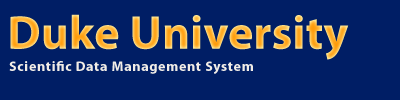
<style>
.page{position:relative;width:400px;height:100px;background:#001e65}
.page>*{position:absolute;margin:0}
.t1{font:48px "MyriadPro-Bold";color:#ff9905}
.t2{font:14px "MyriadPro-Bold";letter-spacing:0.05em;color:#f1ede7}
</style>
<div class="page">
<p class="t1" style="left:10px;top:14px;width:339px;height:46px">Duke University</p>
<p class="t2" style="left:9px;top:61px;width:244px;height:13px">Scientific Data Management System</p>
</div>
